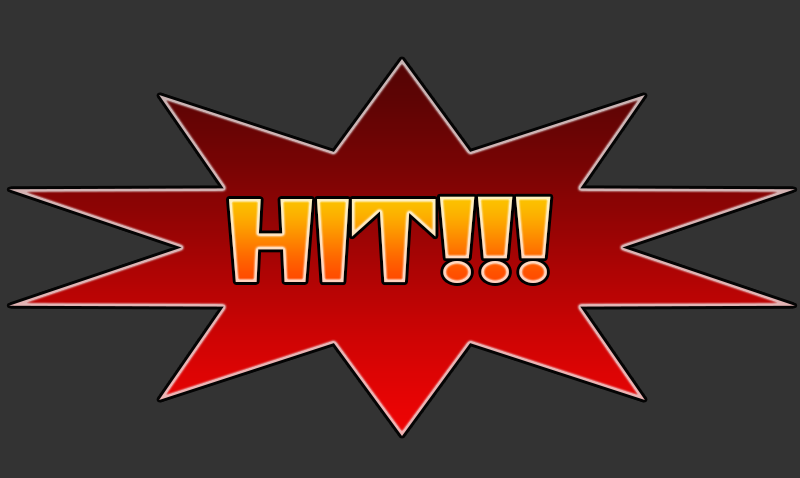
<style>
.page{position:relative;width:800px;height:478px;background:#333333}
.page>*{position:absolute;margin:0}
.t1{font:111.1px "BlitzkriegNF"}
</style>
<div class="page">
<p class="t1" style="left:229px;top:196px;width:322px;height:87px">HIT!!!</p>
</div>
